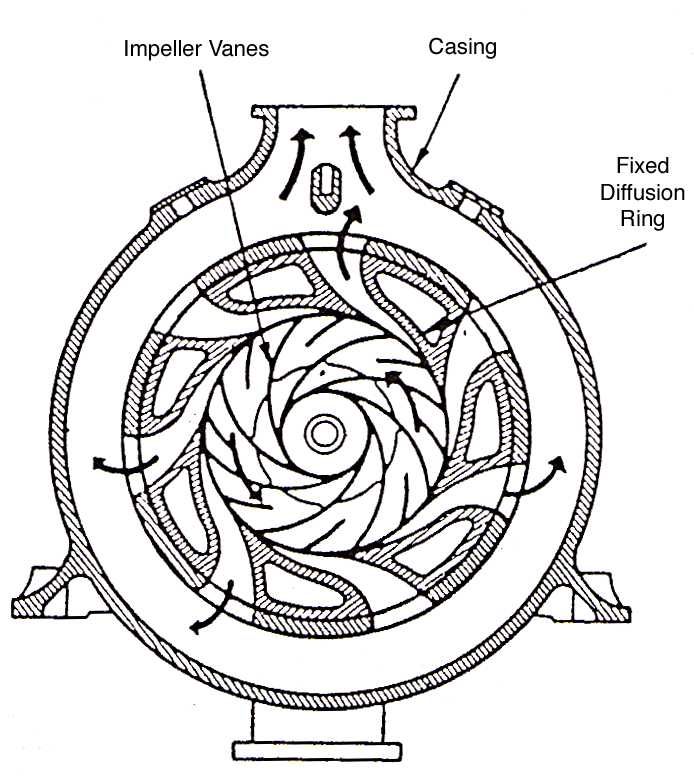
<style>
.page{position:relative;width:694px;height:784px;background:#ffffff}
.page>*{position:absolute;margin:0}
.t1{font:22.1px "Helvetica";color:#000000}
</style>
<div class="page">
<p class="t1" style="left:125px;top:40px;width:144px;height:21px">Impeller Vanes</p>
<p class="t1" style="left:429px;top:37px;width:67px;height:22px">Casing</p>
<p class="t1" style="left:601px;top:157px;width:84px;height:74px;text-align:center">Fixed<br>Diffusion<br>Ring</p>
</div>
